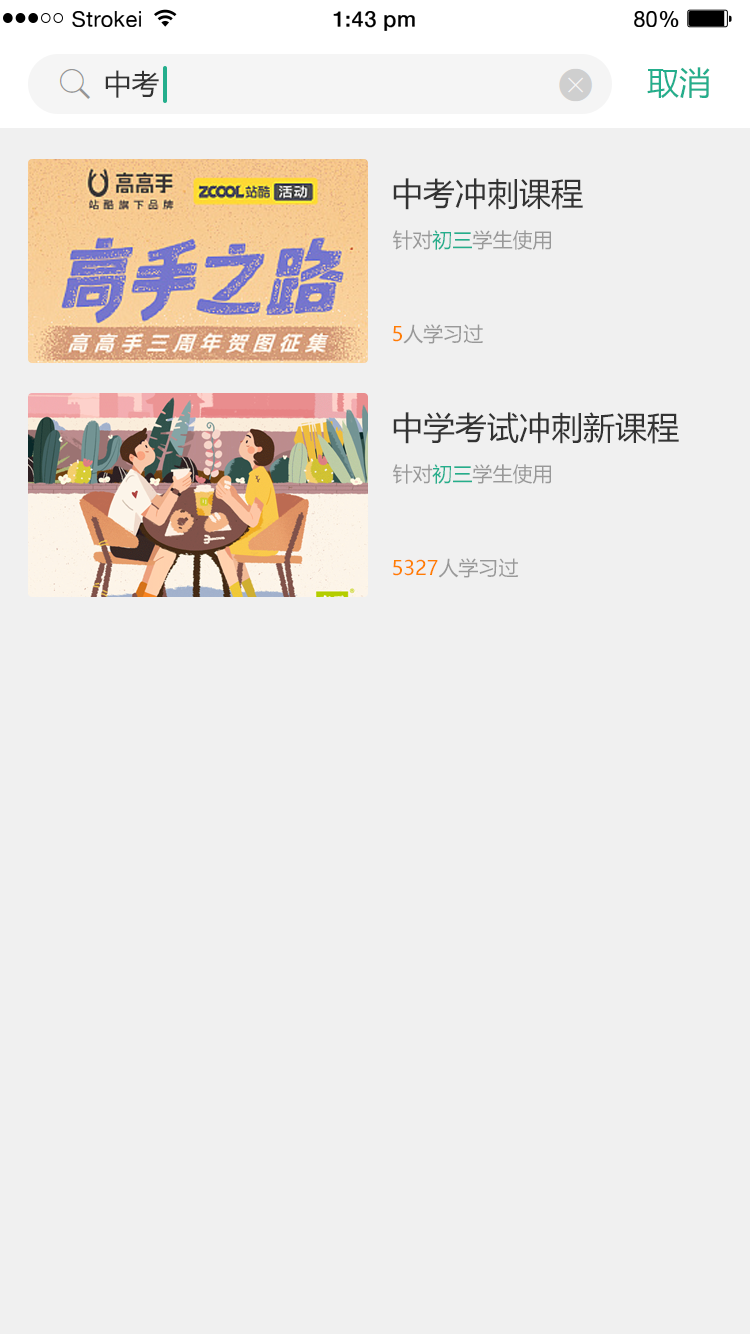
<style>
.page{position:relative;width:750px;height:1334px;background:#f0f0f0}
.page>*{position:absolute;margin:0}
.t1{font:21.8px "HelveticaNeue";letter-spacing:0.02em;color:#000000}
.t2{font:21.8px "HelveticaNeue-Medium";letter-spacing:0.02em;color:#000000}
.t3{font:28px "MicrosoftYaHei";color:#333333}
.t4{font:32px "MicrosoftYaHei";color:#24ae8c}
.t5{font:32px "MicrosoftYaHei";color:#333333}
.t6{font:20px "MicrosoftYaHei";color:#999999}
.t7{font:20px "MicrosoftYaHei";color:#24ae8c}
.t8{font:20px "MicrosoftYaHei";color:#ff7e00}
</style>
<div class="page">
<p class="t1" style="left:72px;top:11px;width:69px;height:16px">Strokei</p>
<p class="t2" style="left:333px;top:11px;width:82px;height:20px">1:43 pm</p>
<p class="t1" style="left:634px;top:11px;width:45px;height:16px">80<span class="t2">%</span></p>
<p class="t3" style="left:105px;top:70px;width:54px;height:28px">中考</p>
<p class="t4" style="left:647px;top:67px;width:63px;height:31px">取消</p>
<p class="t5" style="left:393px;top:178px;width:190px;height:32px">中考冲刺课程</p>
<p class="t6" style="left:393px;top:230px;width:158px;height:20px">针对<span class="t7">初三</span>学生使用</p>
<p class="t6" style="left:393px;top:324px;width:90px;height:20px"><span class="t8">5</span>人学习过</p>
<p class="t5" style="left:393px;top:412px;width:286px;height:32px">中学考试冲刺新课程</p>
<p class="t6" style="left:393px;top:464px;width:158px;height:20px">针对<span class="t7">初三</span>学生使用</p>
<p class="t8" style="left:393px;top:558px;width:126px;height:20px">5327<span class="t6">人学习过</span></p>
</div>
